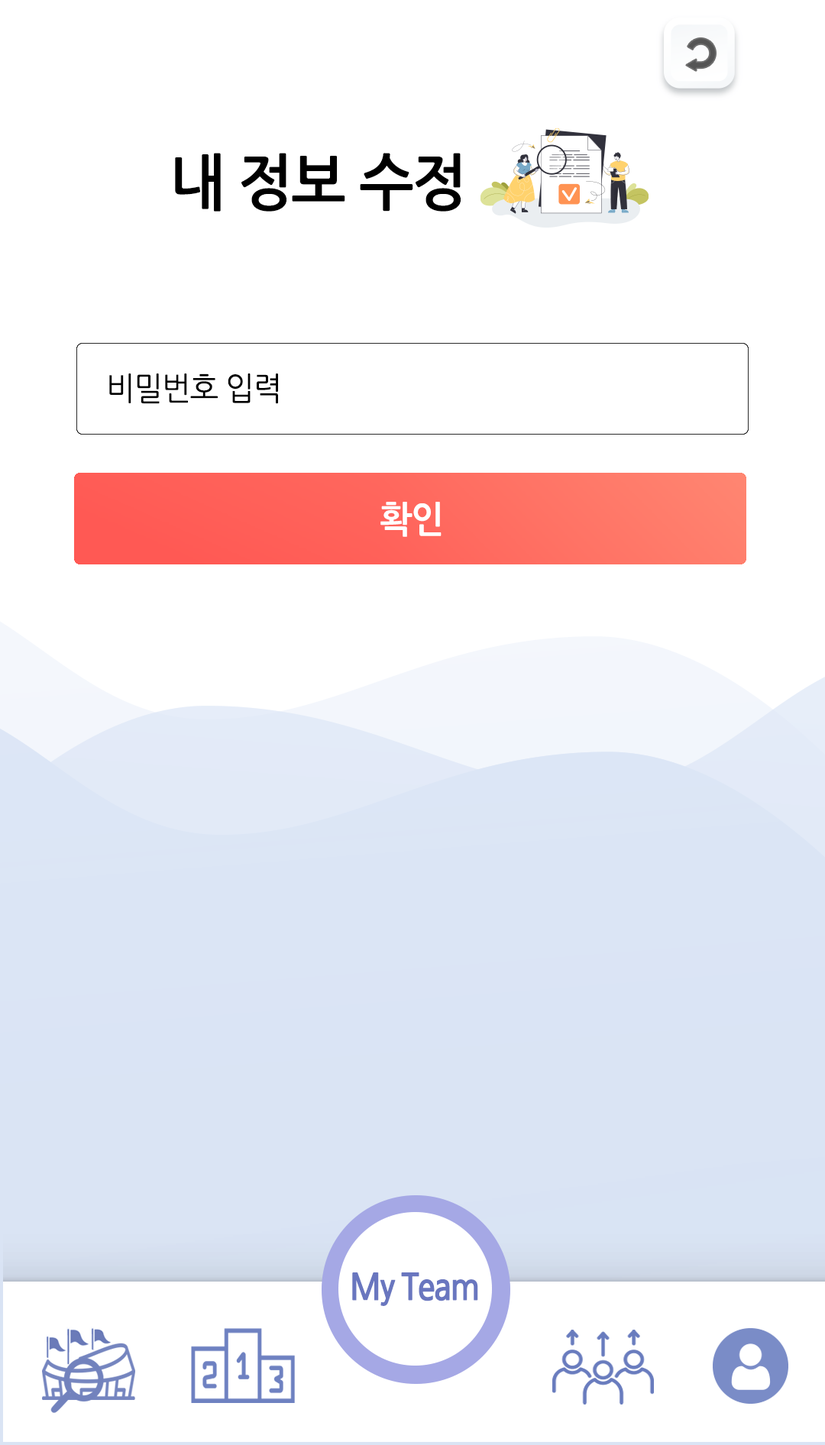
<style>
.page{position:relative;width:825px;height:1445px;background:#ffffff}
.page>*{position:absolute;margin:0}
.t1{font:61.1px "NanumGothicBold";letter-spacing:-0.025em;color:#000000;scale:0.95 1}
.t2{font:32.1px "NanumGothic";letter-spacing:-0.025em;color:#000000;scale:0.95 1}
.t3{font:36.7px "NanumGothicBold";letter-spacing:-0.025em;color:#ffffff;scale:0.95 1}
</style>
<div class="page">
<p class="t1" style="left:175px;top:153px;width:286px;height:59px">내 정보 수정</p>
<p class="t2" style="left:109px;top:374px;width:169px;height:30px">비밀번호 입력</p>
<p class="t3" style="left:380px;top:502px;width:62px;height:35px">확인</p>
</div>
